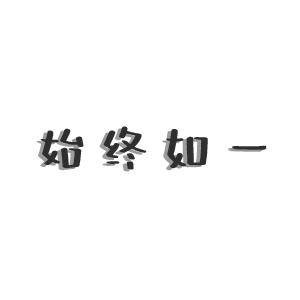
<style>
.page{position:relative;width:300px;height:300px;background:#ffffff}
.page>*{position:absolute;margin:0}
.t1{font:50px "FZZJ-QNTJW--GB1-0";color:#2f2f2f}
.t2{font:50px "FZZJ-QNTJW--GB1-0"}
</style>
<div class="page">
<p class="t1" style="left:40px;top:126px;width:227px;height:44px">始 终 如 一</p>
<p class="t2" style="left:36px;top:128px;width:227px;height:44px">始 终 如 一</p>
</div>
